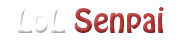
<style>
.page{position:relative;width:185px;height:41px;background:#ffffff}
.page>*{position:absolute;margin:0}
.t1{font:30px "HoboStd";color:#b33737}
.t2{font:30px "HoboStd";color:#ffffff}
</style>
<div class="page">
<p class="t1" style="left:17px;top:7px;width:147px;height:26px"><span class="t2">LoL </span>Senpai</p>
</div>
